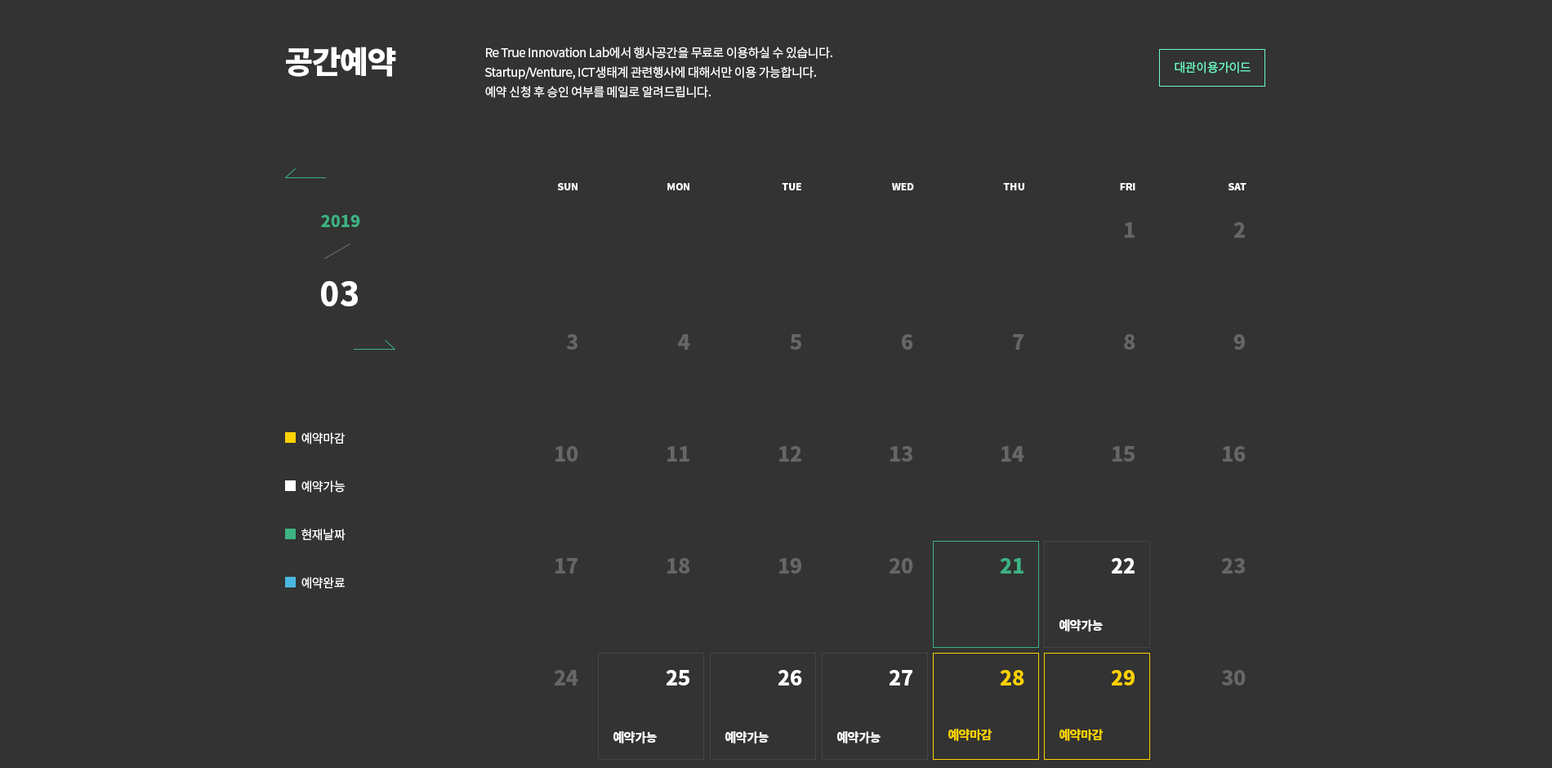
<style>
.page{position:relative;width:1552px;height:768px;background:#323332}
.page>*{position:absolute;margin:0}
.t1{font:31px "NotoSansKR-Black";letter-spacing:-0.03em;color:#ffffff}
.t2{font:12.3px/19.6px "NotoSansKR-Regular";letter-spacing:-0.025em;color:#ffffff}
.t3{font:12.3px "NotoSansKR-Regular";letter-spacing:-0.025em;color:#6cf9c5}
.t4{font:9.8px "NotoSansKR-Black";color:#ffffff}
.t5{font:16.3px "NotoSansKR-Black";color:#3db283}
.t6{font:20.4px/111.9px "NotoSansKR-Black";color:#666666}
.t7{font:20.4px/111.9px "NotoSansKR-Black";color:#ffffff}
.t8{font:20.4px/111.9px "NotoSansKR-Black";color:#ffd200}
.t9{font:32.7px "NotoSansKR-Black";color:#ffffff}
.t10{font:20.4px/111.9px "NotoSansKR-Black";color:#3db283}
.t11{font:12.3px/48.2px "NotoSansKR-Regular";letter-spacing:-0.025em;color:#ffffff}
.t12{font:12.3px "NotoSansKR-Black";letter-spacing:-0.025em;color:#ffffff}
.t13{font:12.3px "NotoSansKR-Black";letter-spacing:-0.025em;color:#ffd200}
</style>
<div class="page">
<p class="t1" style="left:286px;top:47px;width:110px;height:30px">공간예약</p>
<p class="t2" style="left:485px;top:47px;width:348px;height:51px">Re True Innovation Lab에서 행사공간을 무료로 이용하실 수 있습니다.<br>Startup/Venture, ICT생태계 관련행사에 대해서만 이용 가능합니다.<br>예약 신청 후 승인 여부를 메일로 알려드립니다.</p>
<p class="t3" style="left:1175px;top:61px;width:76px;height:13px">대관이용가이드</p>
<p class="t4" style="left:557px;top:183px;width:21px;height:7px">SUN</p>
<p class="t4" style="left:668px;top:183px;width:22px;height:7px">MON</p>
<p class="t4" style="left:782px;top:183px;width:20px;height:7px">TUE</p>
<p class="t4" style="left:892px;top:183px;width:22px;height:7px">WED</p>
<p class="t4" style="left:1003px;top:183px;width:22px;height:7px">THU</p>
<p class="t4" style="left:1120px;top:183px;width:16px;height:7px">FRI</p>
<p class="t4" style="left:1228px;top:183px;width:19px;height:7px">SAT</p>
<p class="t5" style="left:321px;top:215px;width:39px;height:12px">2019</p>
<p class="t6" style="left:1111px;top:222px;width:25px;height:464px;text-align:right">1<br>8<br>15<br><span class="t7">22<br></span><span class="t8">29</span></p>
<p class="t6" style="left:1222px;top:222px;width:24px;height:464px;text-align:right">2<br>9<br>16<br>23<br>30</p>
<p class="t9" style="left:321px;top:281px;width:37px;height:25px">03</p>
<p class="t6" style="left:554px;top:334px;width:25px;height:352px;text-align:right">3<br>10<br>17<br>24</p>
<p class="t6" style="left:666px;top:334px;width:24px;height:352px;text-align:right">4<br>11<br>18<br><span class="t7">25</span></p>
<p class="t6" style="left:778px;top:334px;width:24px;height:352px;text-align:right">5<br>12<br>19<br><span class="t7">26</span></p>
<p class="t6" style="left:889px;top:334px;width:25px;height:352px;text-align:right">6<br>13<br>20<br><span class="t7">27</span></p>
<p class="t6" style="left:1000px;top:334px;width:25px;height:352px;text-align:right">7<br>14<br><span class="t10">21<br></span><span class="t8">28</span></p>
<p class="t11" style="left:302px;top:432px;width:44px;height:157px">예약마감<br>예약가능<br>현재날짜<br>예약완료</p>
<p class="t12" style="left:1060px;top:619px;width:43px;height:13px">예약가능</p>
<p class="t12" style="left:614px;top:731px;width:43px;height:13px">예약가능</p>
<p class="t12" style="left:726px;top:731px;width:43px;height:13px">예약가능</p>
<p class="t12" style="left:838px;top:731px;width:43px;height:13px">예약가능</p>
<p class="t13" style="left:949px;top:729px;width:43px;height:12px">예약마감</p>
<p class="t13" style="left:1060px;top:729px;width:43px;height:12px">예약마감</p>
</div>
